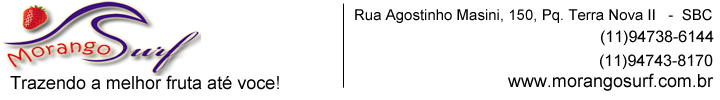
<style>
.page{position:relative;width:720px;height:100px;background:#ffffff}
.page>*{position:absolute;margin:0}
.t1{font:15px "ArialMT";color:#000000}
.t2{font:16px "ArialMT";color:#000000}
.t3{font:18px "ArialMT";color:#000000}
</style>
<div class="page">
<p class="t1" style="left:355px;top:9px;width:357px;height:14px">Rua Agostinho Masini, 150, Pq. Terra Nova II   -  SBC</p>
<p class="t2" style="left:601px;top:30px;width:113px;height:16px">(11)94738-6144</p>
<p class="t2" style="left:600px;top:54px;width:113px;height:16px">(11)94743-8170</p>
<p class="t3" style="left:10px;top:75px;width:269px;height:15px">Trazendo a melhor fruta até voce!</p>
<p class="t3" style="left:508px;top:73px;width:206px;height:18px">www.morangosurf.com.br</p>
</div>
